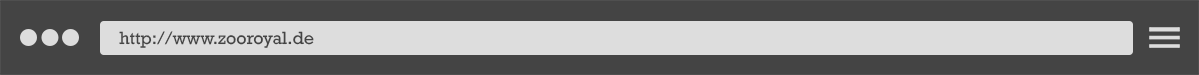
<style>
.page{position:relative;width:1199px;height:75px;background:#444444}
.page>*{position:absolute;margin:0}
.t1{font:18px "Rockwell";color:#444444}
</style>
<div class="page">
<p class="t1" style="left:119px;top:31px;width:195px;height:17px">http://www.zooroyal.de</p>
</div>
